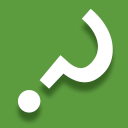
<style>
.page{position:relative;width:128px;height:128px;background:#5d9b3f}
.page>*{position:absolute;margin:0}
.t1{font:173.3px "Consolas";letter-spacing:0.1em;color:#ffffff}
</style>
<div class="page">
<p class="t1" style="left:17px;top:8px;width:96px;height:105px;rotate:42deg">?</p>
</div>
